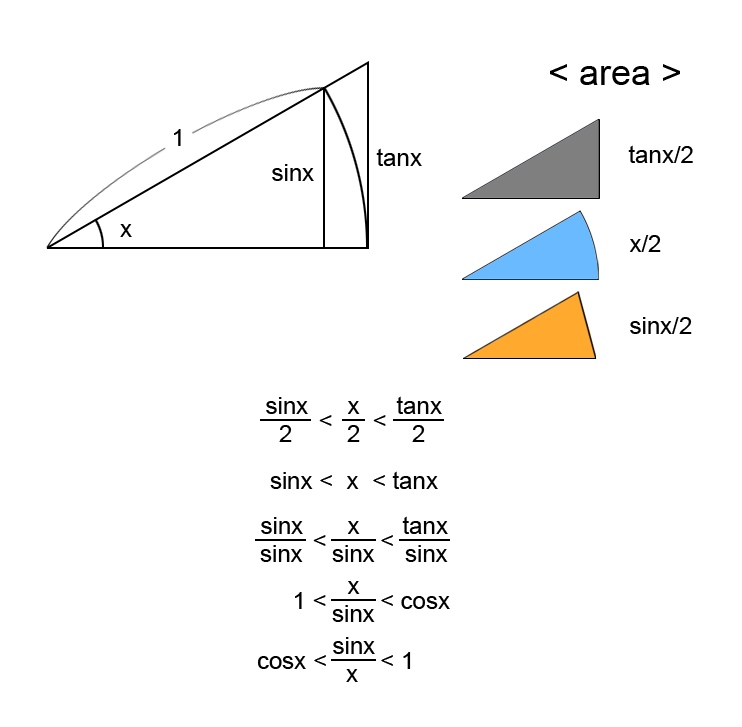
<style>
.page{position:relative;width:742px;height:727px;background:#ffffff}
.page>*{position:absolute;margin:0}
.t1{font:36px "ArialMT";color:#000000}
.t2{font:24px "ArialMT";color:#000000}
</style>
<div class="page">
<p class="t1" style="left:550px;top:64px;width:130px;height:21px">&lt; area &gt;</p>
<p class="t2" style="left:174px;top:129px;width:7px;height:17px">1</p>
<p class="t2" style="left:376px;top:148px;width:46px;height:18px">tanx</p>
<p class="t2" style="left:628px;top:145px;width:65px;height:18px">tanx/2</p>
<p class="t2" style="left:272px;top:164px;width:42px;height:17px">sinx</p>
<p class="t2" style="left:120px;top:224px;width:12px;height:13px">x</p>
<p class="t2" style="left:629px;top:235px;width:32px;height:17px">x/2</p>
<p class="t2" style="left:630px;top:317px;width:62px;height:17px">sinx/2</p>
<p class="t2" style="left:266px;top:397px;width:42px;height:17px">sinx</p>
<p class="t2" style="left:347px;top:401px;width:13px;height:13px">x</p>
<p class="t2" style="left:396px;top:396px;width:46px;height:18px">tanx</p>
<p class="t2" style="left:279px;top:425px;width:13px;height:17px">2</p>
<p class="t2" style="left:319px;top:415px;width:67px;height:11px">&lt;      &lt;</p>
<p class="t2" style="left:347px;top:425px;width:13px;height:17px">2</p>
<p class="t2" style="left:412px;top:425px;width:13px;height:17px">2</p>
<p class="t2" style="left:270px;top:471px;width:168px;height:18px">sinx &lt;  x  &lt; tanx</p>
<p class="t2" style="left:261px;top:517px;width:42px;height:17px">sinx</p>
<p class="t2" style="left:347px;top:521px;width:13px;height:13px">x</p>
<p class="t2" style="left:402px;top:516px;width:46px;height:18px">tanx</p>
<p class="t2" style="left:260px;top:545px;width:43px;height:17px">sinx</p>
<p class="t2" style="left:313px;top:535px;width:80px;height:11px">&lt;        &lt;</p>
<p class="t2" style="left:332px;top:545px;width:43px;height:17px">sinx</p>
<p class="t2" style="left:405px;top:545px;width:43px;height:17px">sinx</p>
<p class="t2" style="left:347px;top:581px;width:13px;height:13px">x</p>
<p class="t2" style="left:295px;top:592px;width:155px;height:17px">1 &lt;        &lt; cosx</p>
<p class="t2" style="left:332px;top:605px;width:43px;height:17px">sinx</p>
<p class="t2" style="left:333px;top:637px;width:42px;height:17px">sinx</p>
<p class="t2" style="left:257px;top:652px;width:154px;height:17px">cosx &lt;        &lt; 1</p>
<p class="t2" style="left:346px;top:669px;width:12px;height:13px">x</p>
</div>
